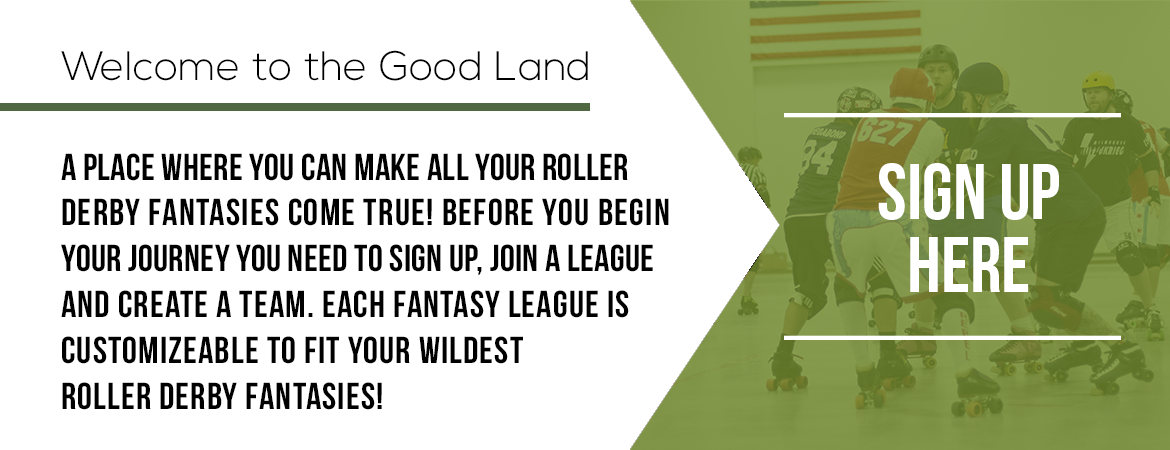
<style>
.page{position:relative;width:1170px;height:450px;background:#ffffff}
.page>*{position:absolute;margin:0}
.t1{font:41.2px "NexaLight";color:#000000}
.t2{font:37.6px/45.8px "BebasNeue";letter-spacing:0.03em;color:#000000}
.t3{font:37.6px/45.8px "BebasNeue";letter-spacing:0.01em;color:#000000}
.t4{font:37.6px/45.8px "BebasNeue";letter-spacing:0.035em;color:#000000}
</style>
<div class="page">
<p class="t1" style="left:61px;top:50px;width:527px;height:31px">Welcome to the Good Land</p>
<p class="t2" style="left:61px;top:153px;width:608px;height:257px"><span class="t3">A place where you can make all your Roller<br></span><span class="t4">Derby fantasies come true! Before you begIn<br></span><span class="t3">your journey you need to sign up, join a league<br></span>and create a team. Each fantasy league is<br>customizEable to fit your wildest<br>roller derby fantasies!</p>
</div>
